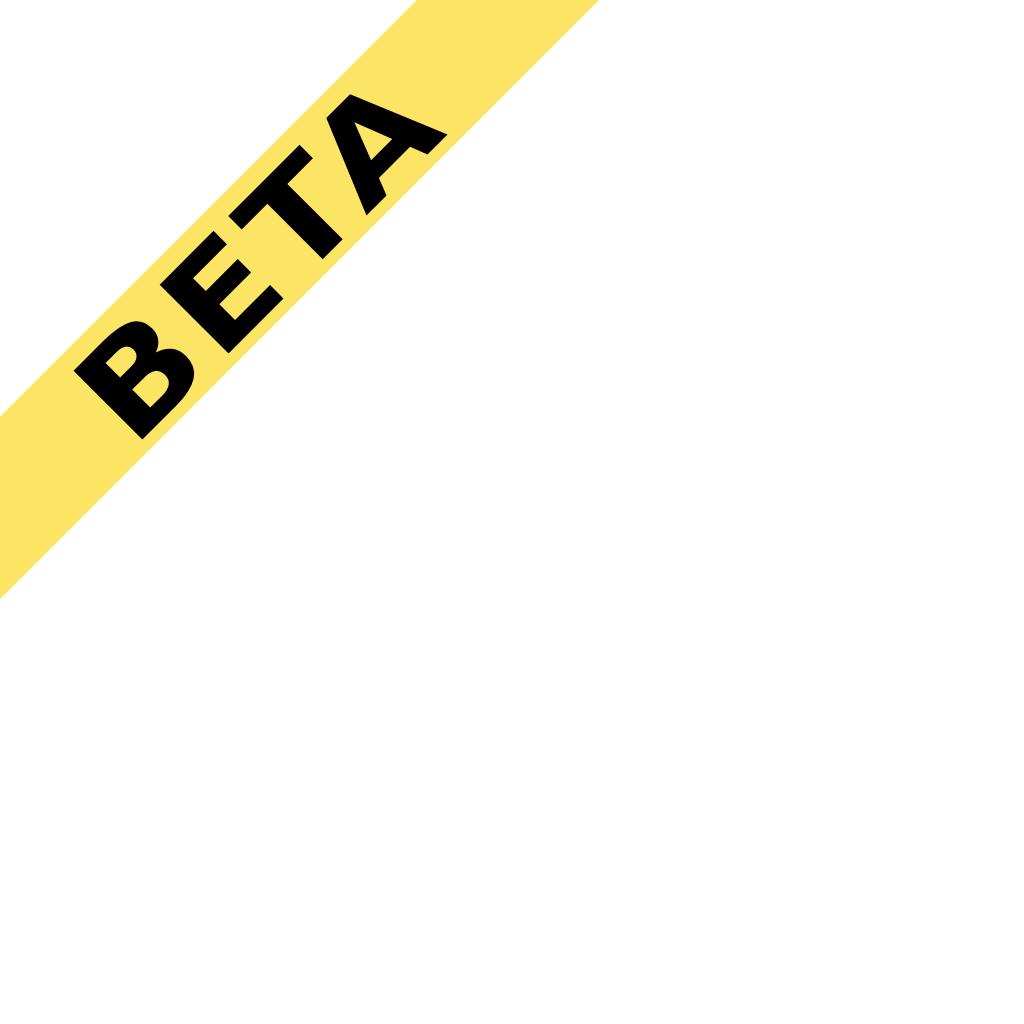
<style>
.page{position:relative;width:1024px;height:1024px;background:#ffffff}
.page>*{position:absolute;margin:0}
.t1{font:133.5px "Arial-Black";letter-spacing:0.05em;color:#000000;scale:1.12 1}
</style>
<div class="page">
<p class="t1" style="left:73px;top:94px;width:375px;height:346px;rotate:-45deg">BETA</p>
</div>
